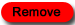
<style>
.page{position:relative;width:75px;height:25px;background:#ff0000}
.page>*{position:absolute;margin:0}
.t1{font:12.5px "ArialMT";color:#000000;font-weight:bold}
</style>
<div class="page">
<p class="t1" style="left:13px;top:7px;width:48px;height:10px">Remove</p>
</div>
